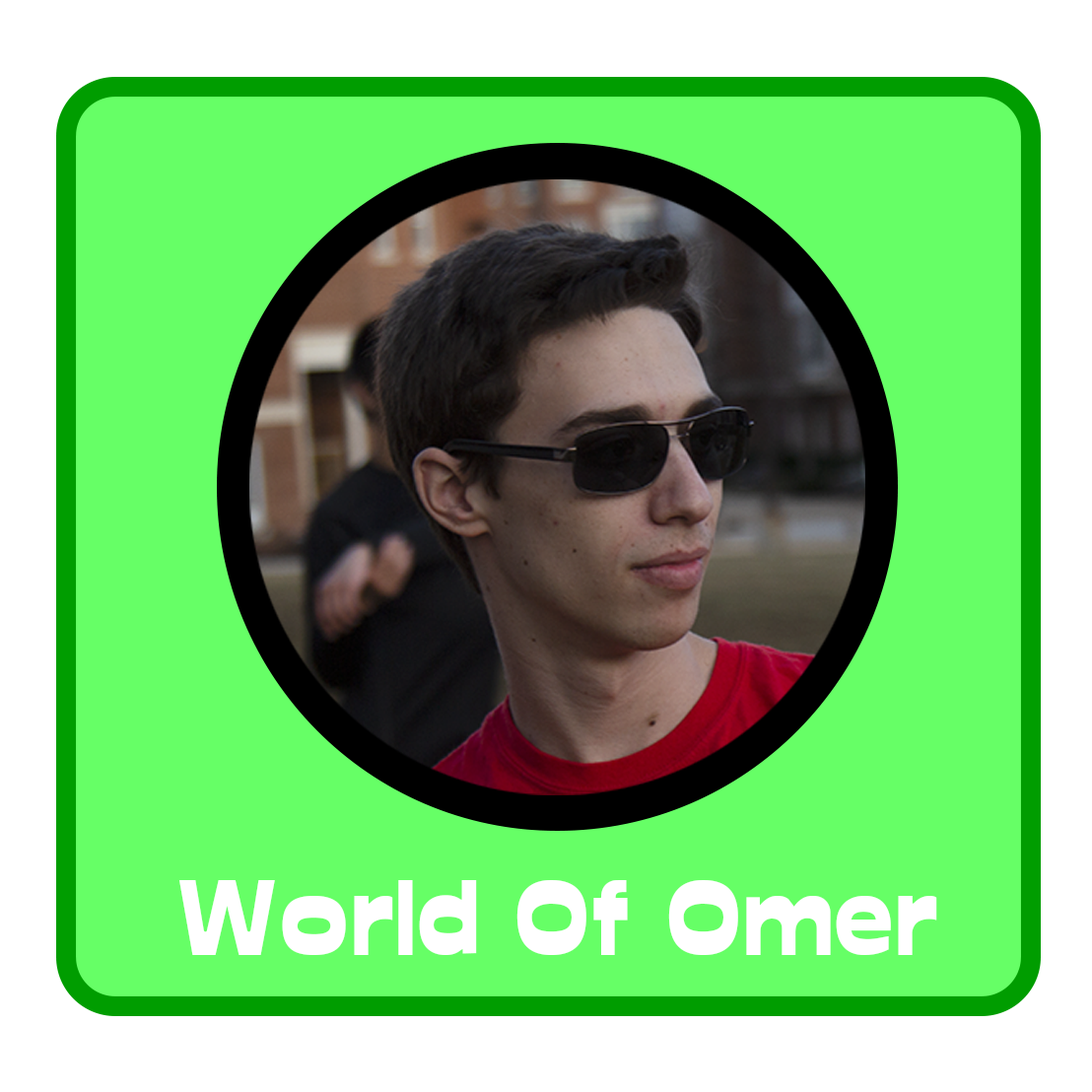
<style>
.page{position:relative;width:1092px;height:1092px;background:#66ff66}
.page>*{position:absolute;margin:0}
.t1{font:102.7px "Glockenspiel";color:#ffffff}
</style>
<div class="page">
<p class="t1" style="left:179px;top:880px;width:758px;height:75px">World Of Omer</p>
</div>
